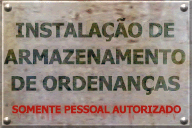
<style>
.page{position:relative;width:192px;height:128px}
.page>*{position:absolute;margin:0}
.t1{font:20px/26.7px "Tahoma-Bold";letter-spacing:-0.02em;text-transform:uppercase}
.t2{font:10.3px "Tahoma-Bold";letter-spacing:-0.045em;color:#b01209;text-transform:uppercase;font-weight:bold}
</style>
<div class="page">
<p class="t1" style="left:4px;top:18px;width:182px;height:77px;text-align:center">Instalação de<br>armazenamento<br>de ordenanças</p>
<p class="t2" style="left:12px;top:105px;width:169px;height:9px;opacity:0.95">Somente pessoal autorizado</p>
</div>
